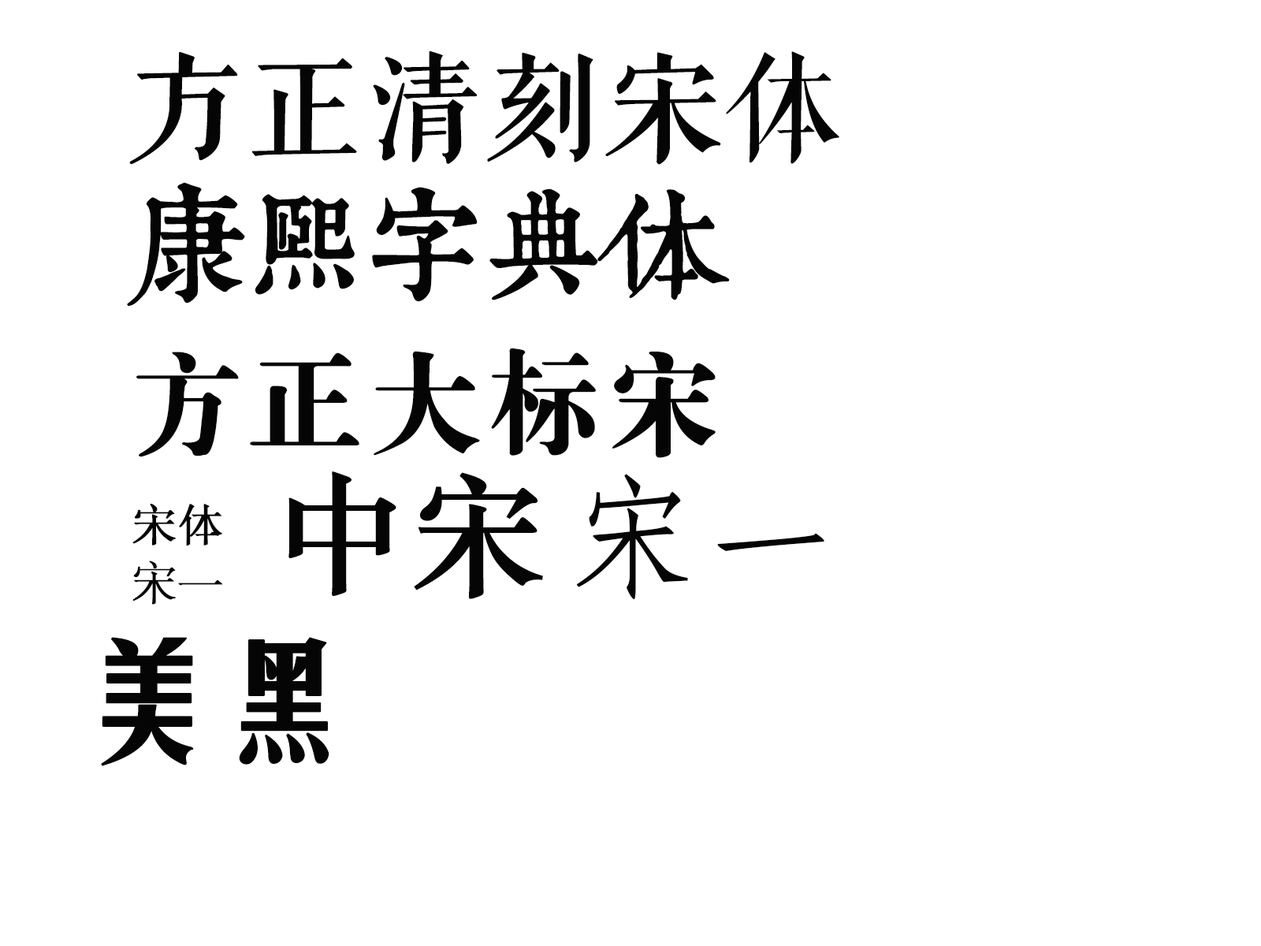
<style>
.page{position:relative;width:1261px;height:946px;background:#ffffff}
.page>*{position:absolute;margin:0}
.t1{font:116.2px "FZQKBYSJW--GB1-0";color:#050505;text-transform:uppercase;font-weight:bold}
.t2{font:116.2px "TpldKhangXiDict";color:#050505;text-transform:uppercase;font-weight:bold}
.t3{font:116.2px "FZDBSK--GBK1-0";color:#050505;text-transform:uppercase;font-weight:bold}
.t4{font:133.4px "STZhongsong";color:#050505;text-transform:uppercase;font-weight:bold}
.t5{font:133.4px "FZFSK--GBK1-0";color:#050505;text-transform:uppercase;font-weight:bold}
.t6{font:45.3px "SimSun";color:#050505;text-transform:uppercase;font-weight:bold}
.t7{font:45.3px "FZSYJW--GB1-0";color:#050505;text-transform:uppercase;font-weight:bold}
.t8{font:133.4px "FZMHK--GBK1-0";color:#050505;text-transform:uppercase;font-weight:bold}
</style>
<div class="page">
<p class="t1" style="left:129px;top:50px;width:710px;height:115px">方正清刻宋体</p>
<p class="t2" style="left:127px;top:182px;width:603px;height:124px">康熙字典体</p>
<p class="t3" style="left:136px;top:348px;width:580px;height:110px">方正大标宋</p>
<p class="t4" style="left:288px;top:471px;width:255px;height:128px">中宋</p>
<p class="t5" style="left:576px;top:474px;width:248px;height:126px">宋一</p>
<p class="t6" style="left:132px;top:504px;width:90px;height:41px">宋体</p>
<p class="t7" style="left:132px;top:560px;width:90px;height:44px">宋一</p>
<p class="t8" style="left:101px;top:637px;width:228px;height:129px">美黑</p>
</div>
